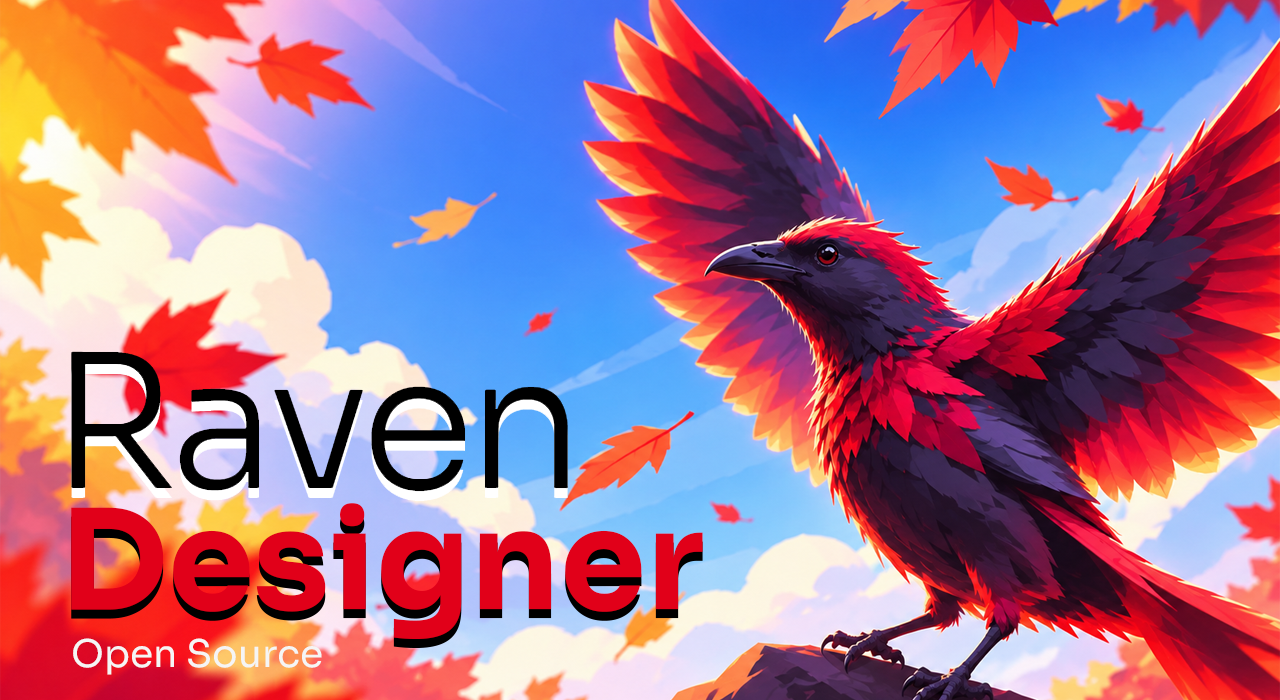
<style>
.page{position:relative;width:1280px;height:700px}
.page>*{position:absolute;margin:0}
.t1{font:137.6px "Sora-Bold";color:#e10019}
.t2{font:37.9px "Sora-Regular";color:#f5f5f5}
</style>
<div class="page">
<p class="t1" style="left:71px;top:503px;width:632px;height:136px">Designer</p>
<p class="t2" style="left:73px;top:638px;width:249px;height:37px">Open Source</p>
</div>
